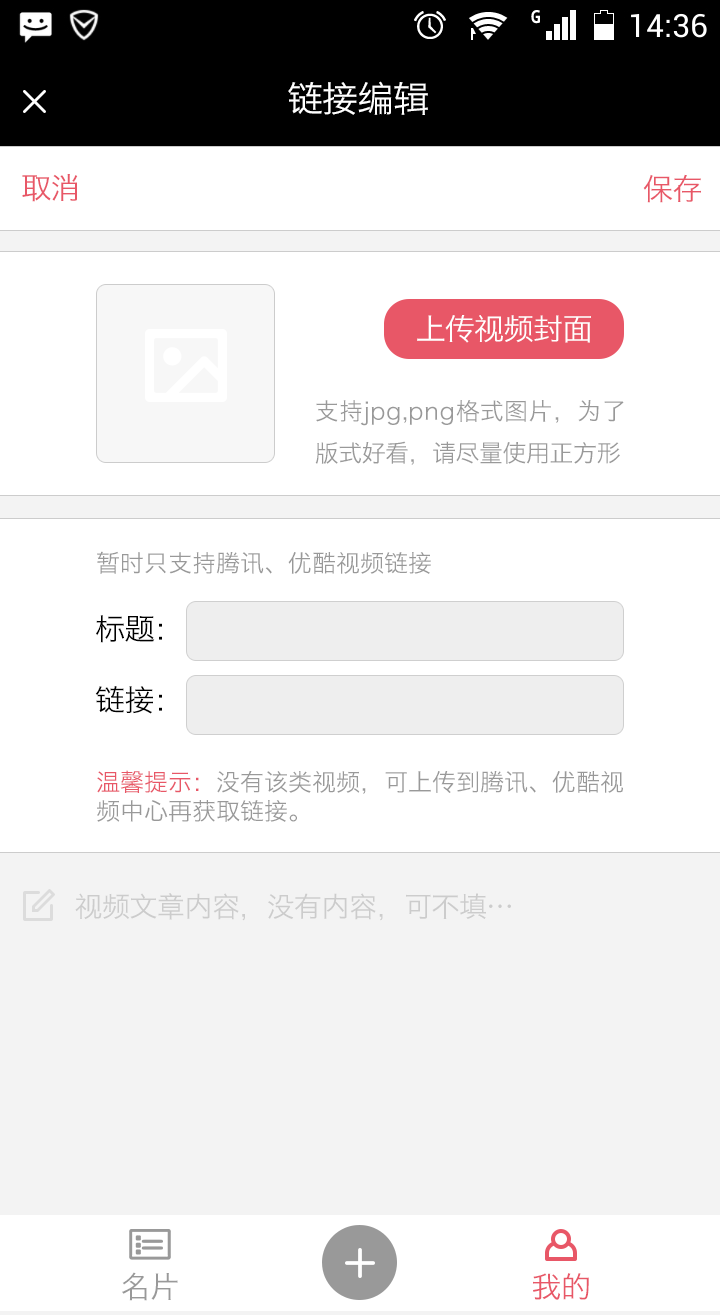
<style>
.page{position:relative;width:720px;height:1315px;background:#ffffff}
.page>*{position:absolute;margin:0}
.t1{font:36px "HiraginoSansGB-W3";letter-spacing:-0.02em;color:#ffffff}
.t2{font:30px "HiraginoSansGB-W3";letter-spacing:-0.02em;color:#e85767}
.t3{font:30px "HiraginoSansGB-W3";letter-spacing:-0.02em;color:#ffffff}
.t4{font:24px/42px "HiraginoSansGB-W3";letter-spacing:-0.02em;color:#999999}
.t5{font:24px "HiraginoSansGB-W3";color:#999999}
.t6{font:30px "HiraginoSansGB-W3";letter-spacing:-0.02em;color:#000000}
.t7{font:24px "HiraginoSansGB-W3";color:#e85767}
.t8{font:28px "HiraginoSansGB-W3";letter-spacing:-0.02em;color:#cccccc}
.t9{font:30px "HiraginoSansGB-W3";letter-spacing:-0.02em;color:#999999}
</style>
<div class="page">
<p class="t1" style="left:288px;top:81px;width:140px;height:34px">链接编辑</p>
<p class="t2" style="left:22px;top:174px;width:56px;height:28px">取消</p>
<p class="t2" style="left:643px;top:174px;width:58px;height:29px">保存</p>
<p class="t3" style="left:417px;top:315px;width:174px;height:28px">上传视频封面</p>
<p class="t4" style="left:315px;top:400px;width:309px;height:65px;text-align:justify">支持jpg,png格式图片，为了版式好看，请尽量使用正方形</p>
<p class="t5" style="left:97px;top:551px;width:334px;height:23px">暂时只支持腾讯、优酷视频链接</p>
<p class="t6" style="left:96px;top:615px;width:66px;height:28px">标题：</p>
<p class="t6" style="left:95px;top:686px;width:67px;height:28px">链接：</p>
<p class="t5" style="left:97px;top:770px;width:526px;height:52px"><span class="t7">温馨提示：</span>没有该类视频，可上传到腾讯、优酷视频中心再获取链接。</p>
<p class="t8" style="left:75px;top:893px;width:436px;height:28px">视频文章内容，没有内容，可不填…</p>
<p class="t9" style="left:122px;top:1272px;width:56px;height:29px">名片</p>
<p class="t2" style="left:533px;top:1273px;width:56px;height:27px">我的</p>
</div>
